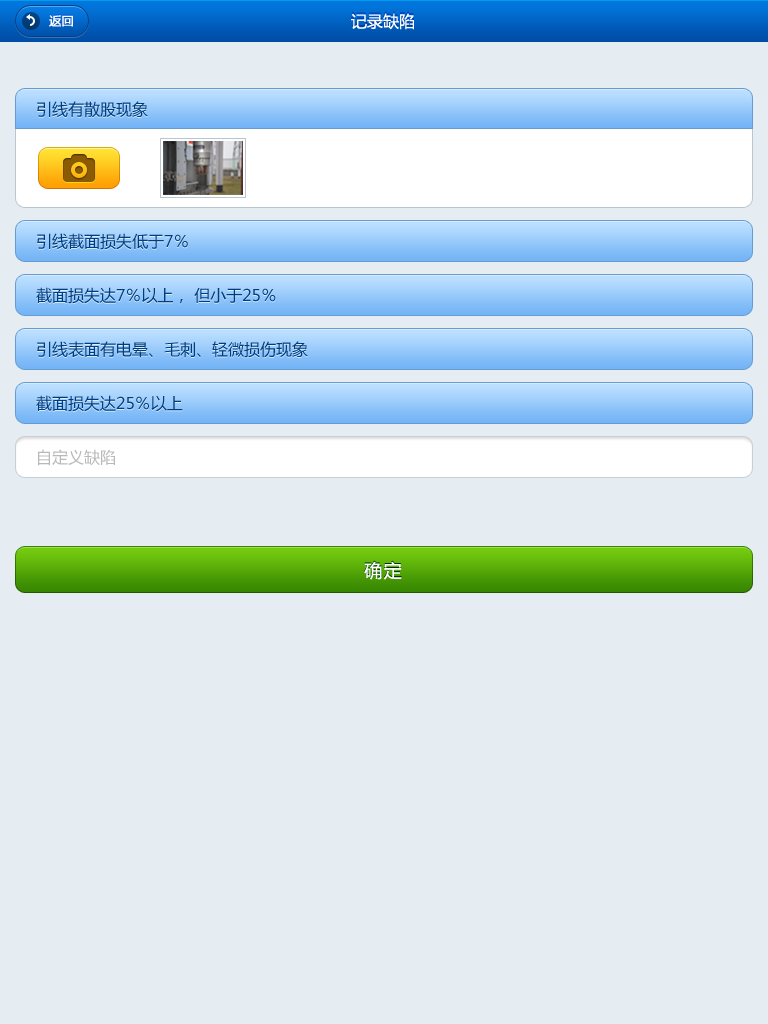
<style>
.page{position:relative;width:768px;height:1024px;background:#e5ecf2}
.page>*{position:absolute;margin:0}
.t1{font:12px "MicrosoftYaHei";color:#ffffff;font-weight:bold}
.t2{font:16px "MicrosoftYaHei";color:#ffffff}
.t3{font:16px "MicrosoftYaHei";color:#003d7f}
.t4{font:16px "MicrosoftYaHei";color:#b9b9b9}
.t5{font:18px "MicrosoftYaHei";letter-spacing:0.08em;color:#ffffff}
</style>
<div class="page">
<p class="t1" style="left:49px;top:15px;width:24px;height:12px">返回</p>
<p class="t2" style="left:351px;top:13px;width:63px;height:17px">记录缺陷</p>
<p class="t3" style="left:37px;top:101px;width:111px;height:17px">引线有散股现象</p>
<p class="t3" style="left:37px;top:233px;width:151px;height:17px">引线截面损失低于7％</p>
<p class="t3" style="left:36px;top:287px;width:240px;height:17px">截面损失达7％以上， 但小于25％</p>
<p class="t3" style="left:37px;top:341px;width:271px;height:17px">引线表面有电晕、毛刺、轻微损伤现象</p>
<p class="t3" style="left:36px;top:395px;width:147px;height:17px">截面损失达25％以上</p>
<p class="t4" style="left:38px;top:449px;width:77px;height:17px">自定义缺陷</p>
<p class="t5" style="left:364px;top:561px;width:38px;height:19px">确定</p>
</div>
